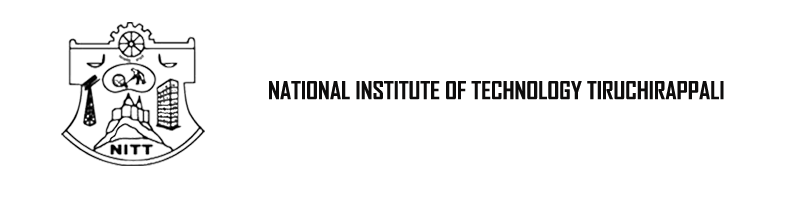
<style>
.page{position:relative;width:800px;height:200px;background:#ffffff}
.page>*{position:absolute;margin:0}
.t1{font:23.7px "AgencyFB-Bold";color:#0d0c0c;scale:1.05 1}
</style>
<div class="page">
<p class="t1" style="left:269px;top:81px;width:455px;height:19px">NATIONAL INSTITUTE OF TECHNOLOGY TIRUCHIRAPPALI</p>
</div>
